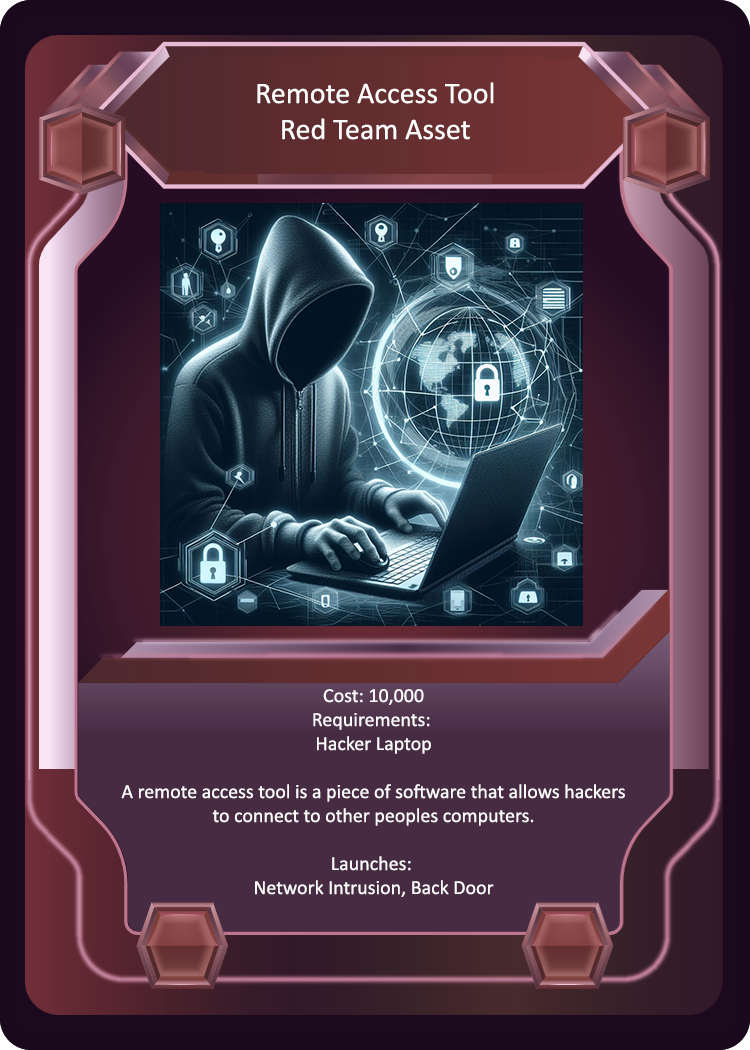
<style>
.page{position:relative;width:750px;height:1050px}
.page>*{position:absolute;margin:0}
.t1{font:30px "Calibri";color:#fcfbfb}
.t2{font:20px "Calibri";color:#fcfbfb}
</style>
<div class="page">
<p class="t1" style="left:257px;top:82px;width:237px;height:58px;text-align:center">Remote Access Tool<br>Red Team Asset</p>
<p class="t2" style="left:121px;top:689px;width:504px;height:208px;text-align:center">Cost: 10,000<br>Requirements: <br>Hacker Laptop<br><br>A remote access tool is a piece of software that allows hackers<br>to connect to other peoples computers.<br><br>Launches: <br>Network Intrusion, Back Door</p>
</div>
